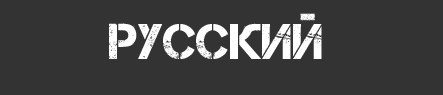
<style>
.page{position:relative;width:443px;height:95px;background:#333333}
.page>*{position:absolute;margin:0}
.t1{font:50px "Captureit";color:#ffffff}
</style>
<div class="page">
<p class="t1" style="left:109px;top:13px;width:213px;height:46px">русский</p>
</div>
